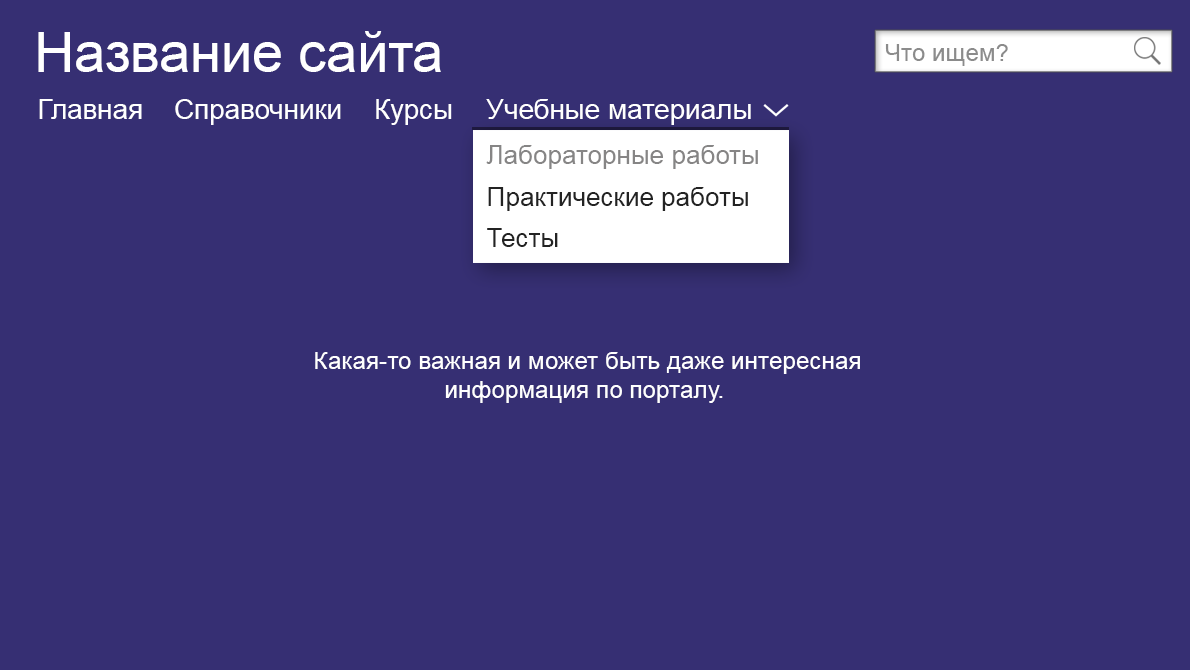
<style>
.page{position:relative;width:1190px;height:670px;background:#362f73}
.page>*{position:absolute;margin:0}
.t1{font:55.6px "ArialMT";color:#ffffff}
.t2{font:24.3px "ArialMT";color:#8b8b8b}
.t3{font:27.8px "ArialMT";color:#ffffff}
.t4{font:26px/41.7px "ArialMT";color:#232323}
.t5{font:26px/41.7px "ArialMT";color:#868585}
.t6{font:24.3px "ArialMT";color:#ffffff}
</style>
<div class="page">
<p class="t1" style="left:38px;top:31px;width:403px;height:41px">Название сайта</p>
<p class="t2" style="left:885px;top:44px;width:123px;height:22px">Что ищем?</p>
<p class="t3" style="left:39px;top:99px;width:103px;height:20px">Главная</p>
<p class="t3" style="left:175px;top:99px;width:166px;height:26px">Справочники</p>
<p class="t3" style="left:376px;top:99px;width:76px;height:26px">Курсы</p>
<p class="t3" style="left:486px;top:99px;width:265px;height:26px">Учебные материалы</p>
<p class="t4" style="left:486px;top:145px;width:272px;height:102px"><span class="t5">Лабораторные работы<br></span>Практические работы<br>Тесты</p>
<p class="t6" style="left:315px;top:352px;width:545px;height:51px;text-align:center">Какая-то важная и может быть даже интересная<br>информация по порталу.</p>
</div>
